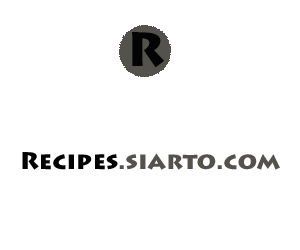
<style>
.page{position:relative;width:300px;height:250px;background:#ffffff}
.page>*{position:absolute;margin:0}
.t1{font:48px "LithosPro-Black";color:#040404}
.t2{font:24px "LithosPro-Black";color:#53524d}
.t3{font:24px "LithosPro-Black";color:#010101}
</style>
<div class="page">
<p class="t1" style="left:132px;top:32px;width:33px;height:36px">R</p>
<p class="t2" style="left:22px;top:152px;width:258px;height:18px"><span class="t3">Recipes</span>.siarto.com</p>
</div>
